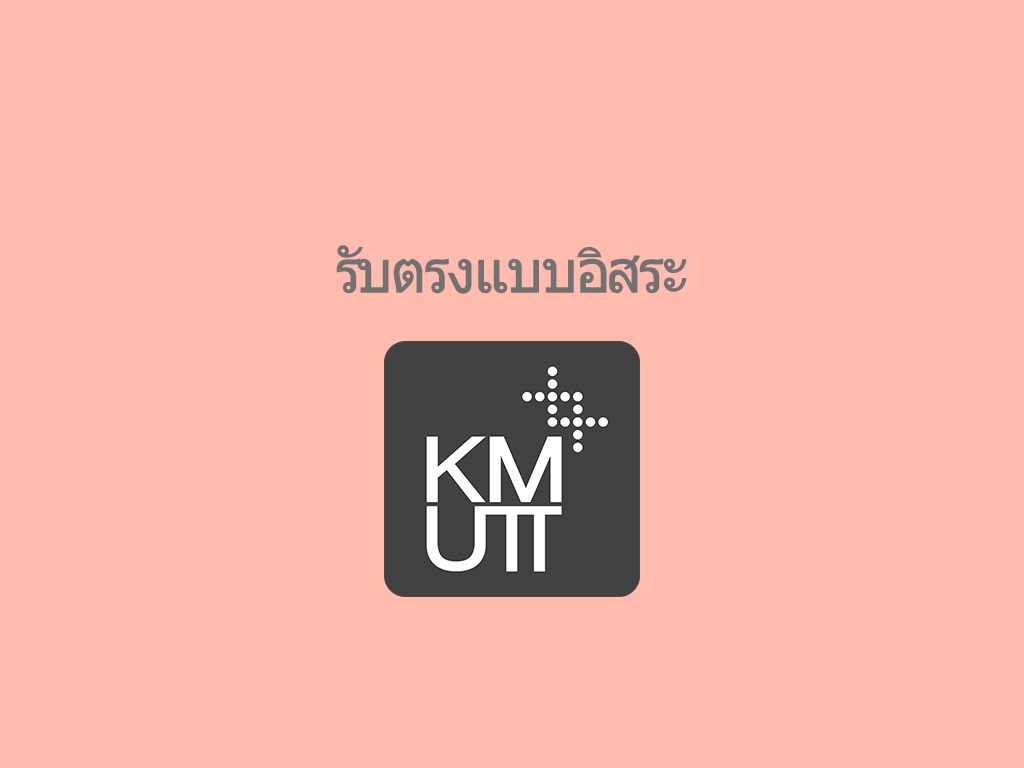
<style>
.page{position:relative;width:1024px;height:768px;background:#ffbbad}
.page>*{position:absolute;margin:0}
.t1{font:60px "Tahoma";letter-spacing:-0.05em;color:#727272}
</style>
<div class="page">
<p class="t1" style="left:336px;top:245px;width:351px;height:49px">รับตรงแบบอิสระ</p>
</div>
